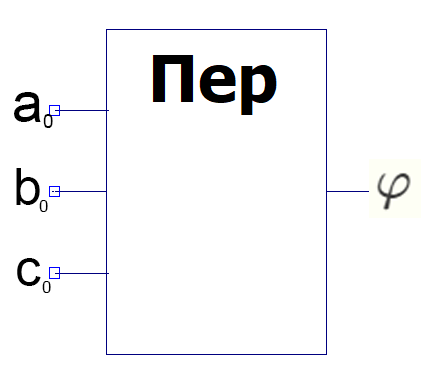
<style>
.page{position:relative;width:421px;height:385px;background:#ffffff}
.page>*{position:absolute;margin:0}
.t1{font:56.4px "ArialMT";color:#000000}
.t2{font:18.8px "ArialMT";color:#000000}
.t3{font:52.2px "ArialMT";color:#000000}
.t4{font:17.4px "ArialMT";color:#000000}
</style>
<div class="page">
<p class="t1" style="left:14px;top:92px;width:27px;height:30px">a</p>
<p class="t2" style="left:43px;top:114px;width:10px;height:14px">0</p>
<p class="t3" style="left:16px;top:168px;width:24px;height:37px">b</p>
<p class="t4" style="left:39px;top:200px;width:9px;height:12px">0</p>
<p class="t3" style="left:17px;top:258px;width:24px;height:28px">c</p>
<p class="t4" style="left:42px;top:281px;width:9px;height:12px">0</p>
</div>
